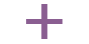
<style>
.page{position:relative;width:89px;height:44px;background:#ffffff}
.page>*{position:absolute;margin:0}
.t1{font:71.3px "Helvetica";color:#8a5e91}
</style>
<div class="page">
<p class="t1" style="left:26px;top:4px;width:37px;height:35px">+</p>
</div>
